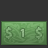
<style>
.page{position:relative;width:48px;height:48px;background:#333333}
.page>*{position:absolute;margin:0}
.t1{font:15px "MyriadPro-Bold";color:#7da674}
.t2{font:11px "MyriadPro-Bold";color:#90b686}
.t3{font:15px "MyriadPro-Bold";color:#77a36f}
</style>
<div class="page">
<p class="t1" style="left:5px;top:27px;width:7px;height:13px">$</p>
<p class="t2" style="left:20px;top:29px;width:4px;height:8px">1</p>
<p class="t3" style="left:35px;top:27px;width:7px;height:13px">$</p>
</div>
